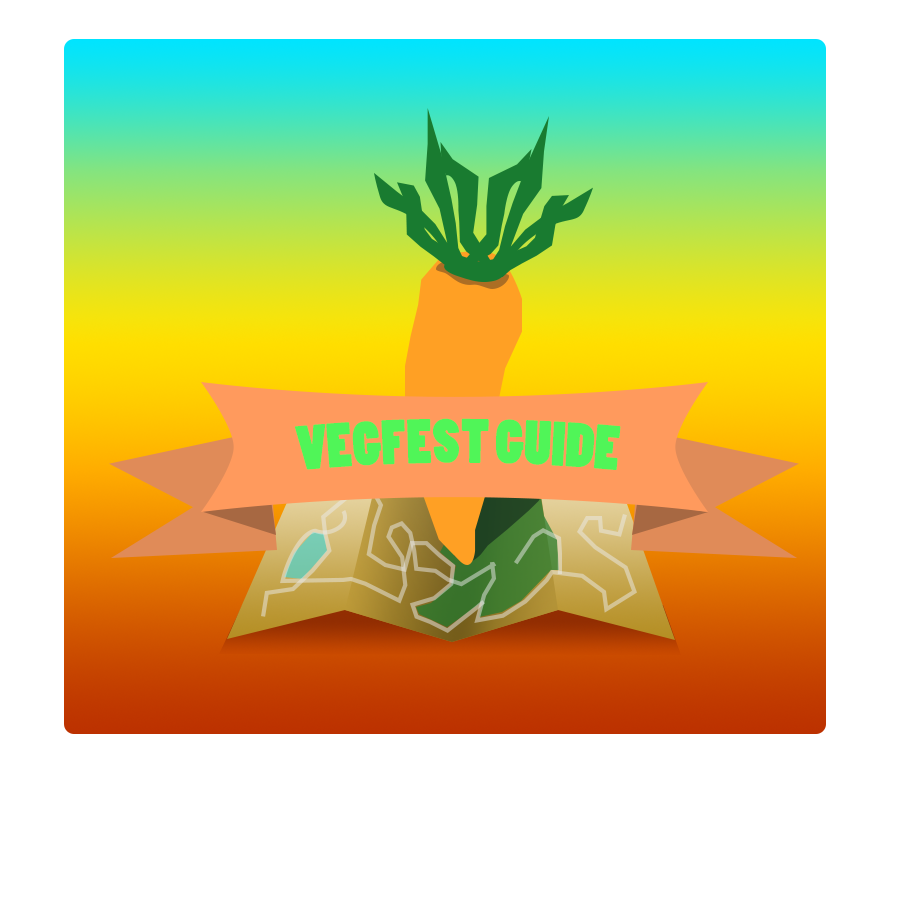
<style>
.page{position:relative;width:900px;height:900px;background:#ffffff}
.page>*{position:absolute;margin:0}
.t1{font:58.3px "PoplarStd";color:#50f558}
</style>
<div class="page">
<p class="t1" style="left:295px;top:418px;width:326px;height:52px">VEGFEST GUIDE</p>
</div>
